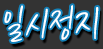
<style>
.page{position:relative;width:103px;height:49px;background:#333333}
.page>*{position:absolute;margin:0}
.t1{font:46.7px "KCC-eunyoung-Regular";color:#ffffff}
</style>
<div class="page">
<p class="t1" style="left:4px;top:5px;width:95px;height:37px">일시정지</p>
</div>
